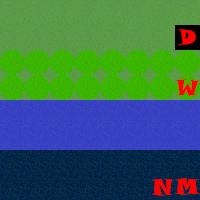
<style>
.page{position:relative;width:200px;height:200px}
.page>*{position:absolute;margin:0}
.t1{font:22px "SnapITC-Regular";color:#ff0000}
</style>
<div class="page">
<p class="t1" style="left:178px;top:29px;width:18px;height:16px">D</p>
<p class="t1" style="left:175px;top:79px;width:26px;height:17px">W</p>
<p class="t1" style="left:152px;top:179px;width:22px;height:17px">N</p>
<p class="t1" style="left:175px;top:178px;width:25px;height:17px">M</p>
</div>
